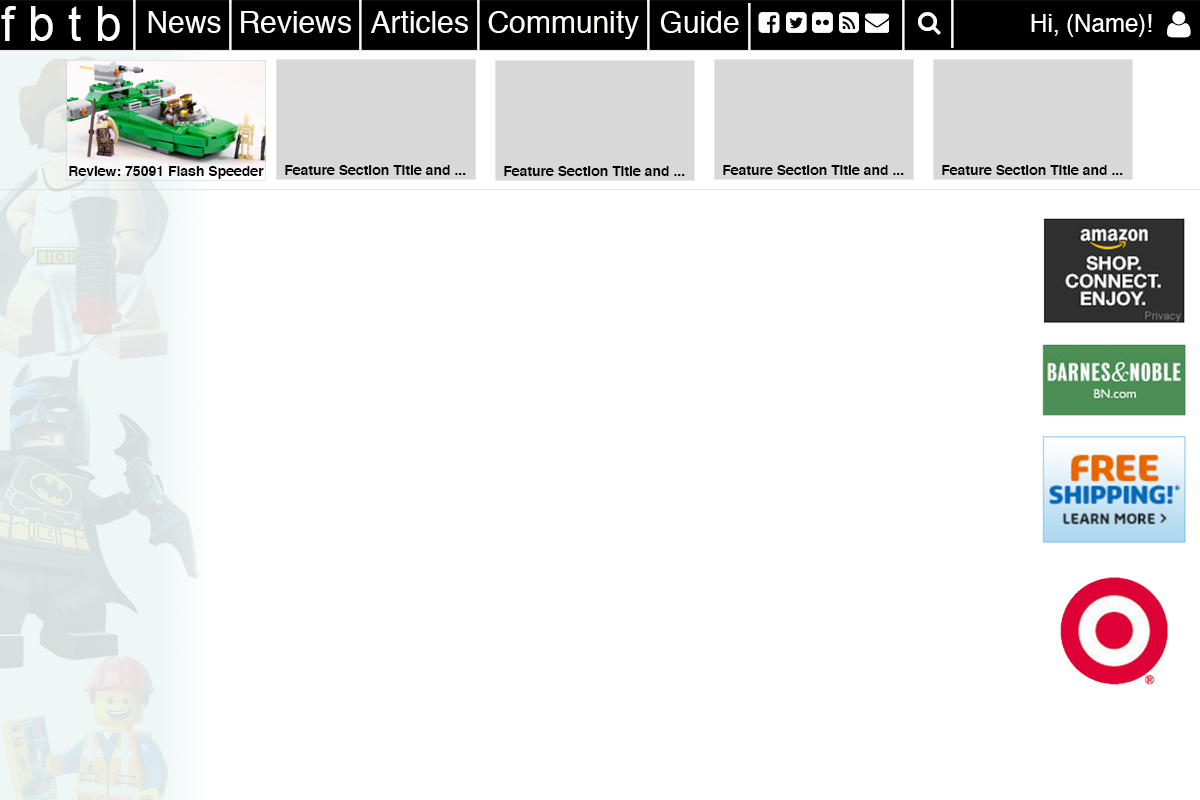
<style>
.page{position:relative;width:1200px;height:800px;background:#ffffff}
.page>*{position:absolute;margin:0}
.t1{font:48px "ArialMT";color:#ffffff}
.t2{font:30px "Helvetica";color:#fcfbf9}
.t3{font:24px "Helvetica";color:#ffffff}
.t4{font:14px "Helvetica-Bold";color:#000000}
</style>
<div class="page">
<p class="t1" style="left:1px;top:6px;width:119px;height:35px">f b t b</p>
<p class="t2" style="left:148px;top:11px;width:73px;height:22px">News</p>
<p class="t2" style="left:241px;top:11px;width:110px;height:22px">Reviews</p>
<p class="t2" style="left:371px;top:11px;width:97px;height:22px">Articles</p>
<p class="t2" style="left:488px;top:11px;width:151px;height:28px">Community</p>
<p class="t2" style="left:660px;top:11px;width:79px;height:22px">Guide</p>
<p class="t3" style="left:1031px;top:14px;width:121px;height:23px">Hi, (Name)!</p>
<p class="t4" style="left:69px;top:166px;width:195px;height:13px">Review: 75091 Flash Speeder</p>
<p class="t4" style="left:285px;top:165px;width:181px;height:10px">Feature Section Title and ...</p>
<p class="t4" style="left:504px;top:166px;width:181px;height:10px">Feature Section Title and ...</p>
<p class="t4" style="left:723px;top:165px;width:181px;height:10px">Feature Section Title and ...</p>
<p class="t4" style="left:942px;top:165px;width:181px;height:10px">Feature Section Title and ...</p>
</div>
